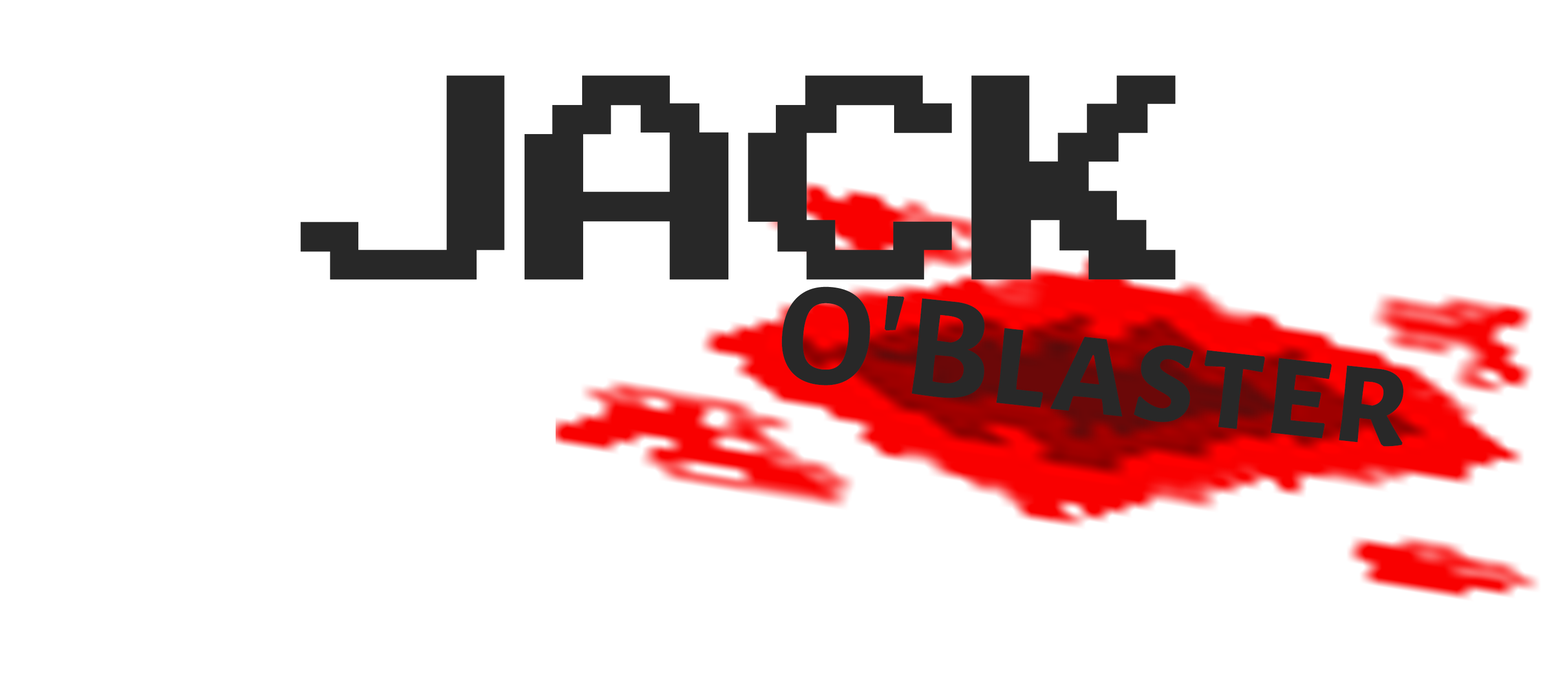
<style>
.page{position:relative;width:1568px;height:678px;background:#ffffff}
.page>*{position:absolute;margin:0}
.t1{font:409.1px "ArcadeClassic";letter-spacing:0.005em;color:#282828}
.t2{font:148.4px "AlegreyaSansSC-Bold";letter-spacing:0.025em;color:#282828}
</style>
<div class="page">
<p class="t1" style="left:300px;top:75px;width:875px;height:205px">Jack</p>
<p class="t2" style="left:781px;top:286px;width:622px;height:161px;rotate:6deg">O’Blaster</p>
</div>
